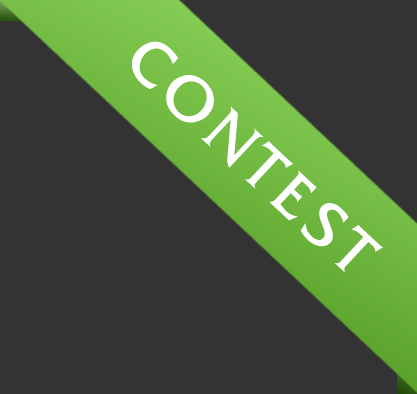
<style>
.page{position:relative;width:417px;height:394px;background:#333333}
.page>*{position:absolute;margin:0}
.t1{font:72px "FrizQuadrata-Thin";letter-spacing:0.1em;color:#ffffff}
</style>
<div class="page">
<p class="t1" style="left:132px;top:41px;width:251px;height:232px;rotate:43deg">CONTEST</p>
</div>
